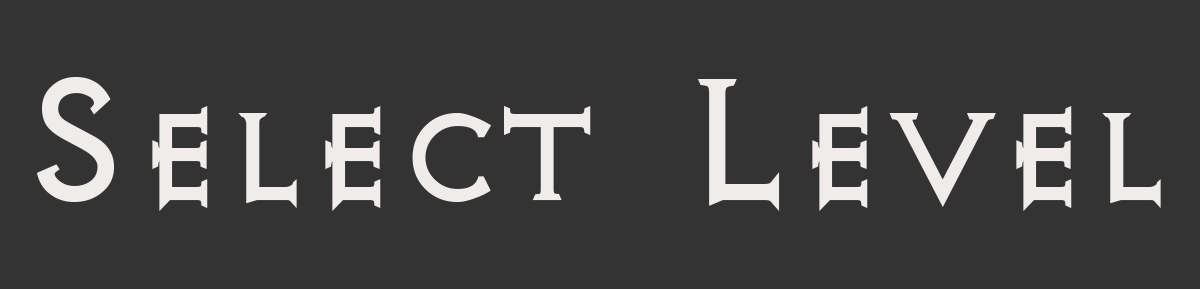
<style>
.page{position:relative;width:1200px;height:289px;background:#333333}
.page>*{position:absolute;margin:0}
.t1{font:200px "AvQest";color:#f0ecec}
</style>
<div class="page">
<p class="t1" style="left:37px;top:77px;width:1124px;height:134px">Select Level</p>
</div>
